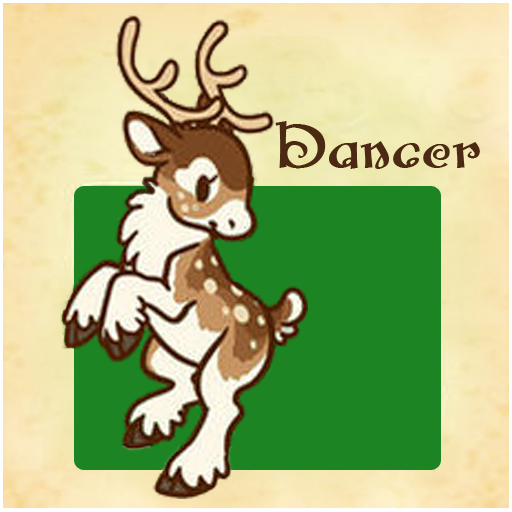
<style>
.page{position:relative;width:512px;height:512px;background:#1c8423}
.page>*{position:absolute;margin:0}
.t1{font:66.7px "SantasBigSecretBB";color:#4c2913}
</style>
<div class="page">
<p class="t1" style="left:275px;top:121px;width:205px;height:48px">Dancer</p>
</div>
